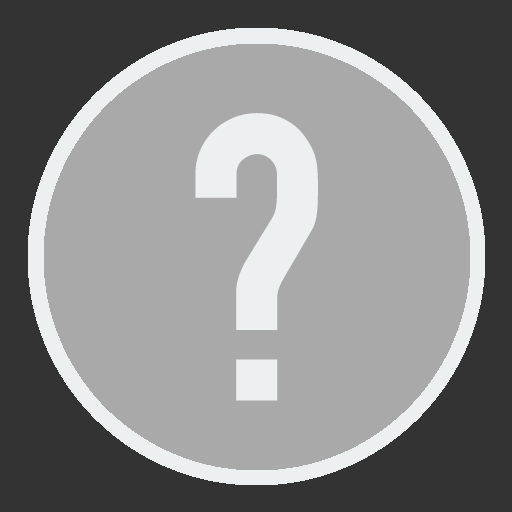
<style>
.page{position:relative;width:512px;height:512px;background:#a9a9a9}
.page>*{position:absolute;margin:0}
.t1{font:400px "DINCondensed-Bold";letter-spacing:-0.005em;color:#ecf0f1}
</style>
<div class="page">
<p class="t1" style="left:195px;top:113px;width:123px;height:288px">?</p>
</div>
